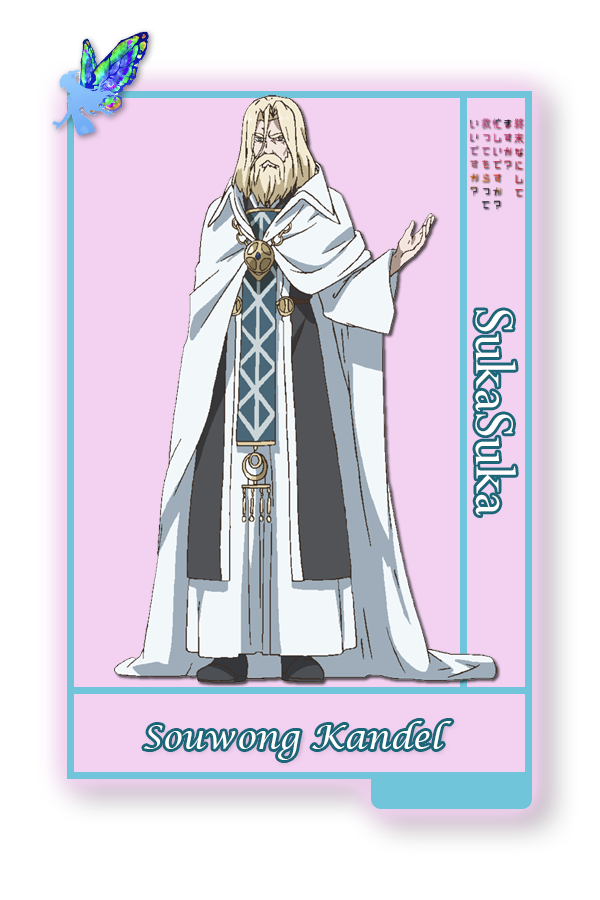
<style>
.page{position:relative;width:600px;height:900px;background:#f3d2f1}
.page>*{position:absolute;margin:0}
.t1{font:62.5px "Perpetua";color:#ffffff}
.t2{font:33.3px "LucidaCalligraphy-Italic";color:#ffffff}
</style>
<div class="page">
<p class="t1" style="left:475px;top:310px;width:41px;height:206px;rotate:90deg">SukaSuka</p>
<p class="t2" style="left:144px;top:721px;width:308px;height:39px">Souwong Kandel</p>
</div>
